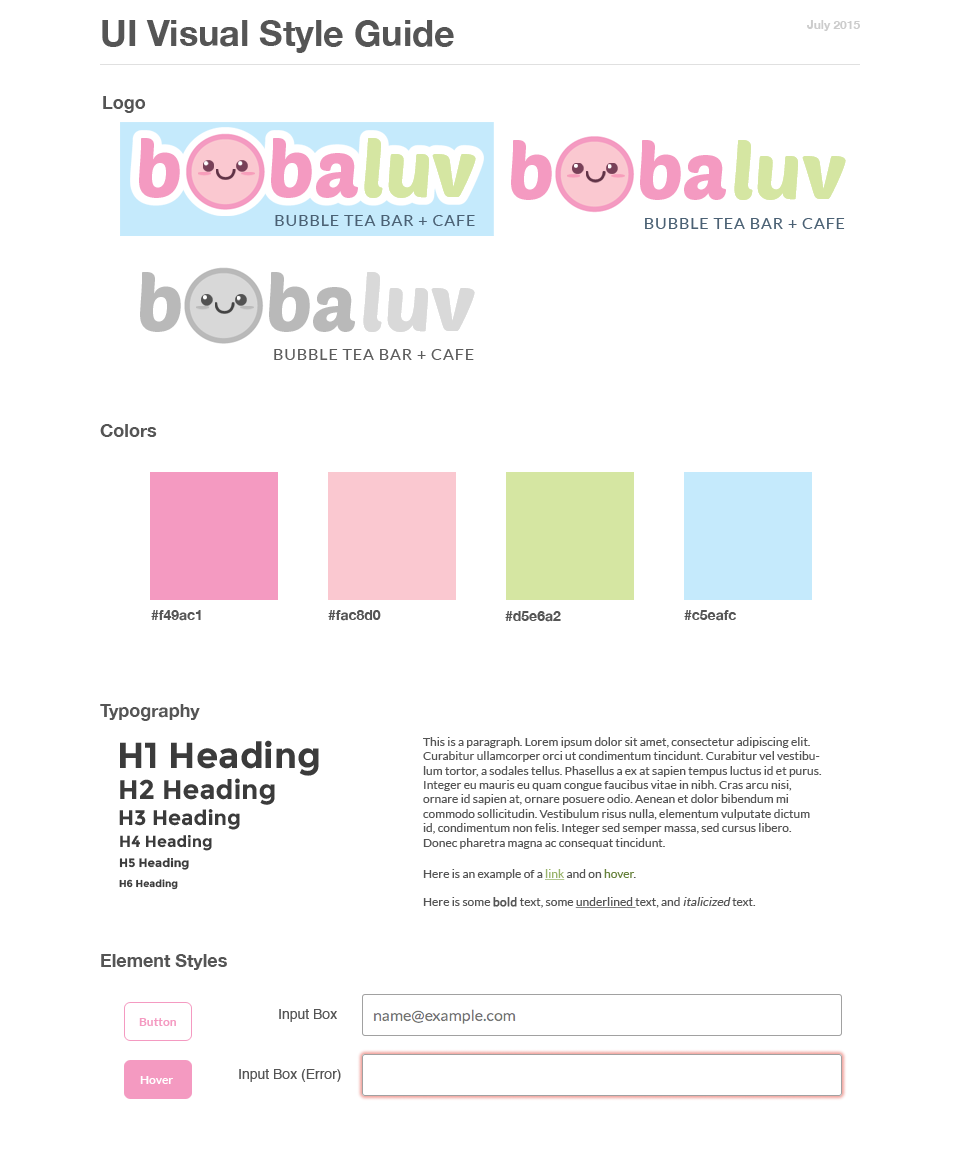
<style>
.page{position:relative;width:960px;height:1150px;background:#ffffff}
.page>*{position:absolute;margin:0}
.t1{font:36px "HelveticaNeue-Bold";color:#555555}
.t2{font:12px "HelveticaNeue-Bold";color:#cccccc}
.t3{font:18px "HelveticaNeue-Bold";color:#555555}
.t4{font:79.1px "PoetsenOne-Regular";color:#f49ac1}
.t5{font:79.1px "PoetsenOne-Regular";color:#d5e6a2}
.t6{font:16.2px "Lato-Regular";letter-spacing:0.05em;color:#4b6174}
.t7{font:79.1px "PoetsenOne-Regular";color:#b9b9b9}
.t8{font:79.1px "PoetsenOne-Regular";color:#d9d9d9}
.t9{font:14px "HelveticaNeue-Bold";color:#555555}
.t10{font:12px "Lato-Regular";color:#555555}
.t11{font:36px "Montserrat-Bold";color:#3b3b3b}
.t12{font:27px "Montserrat-Bold";color:#3b3b3b}
.t13{font:21px "Montserrat-Bold";color:#3b3b3b}
.t14{font:16px "Montserrat-Bold";color:#3b3b3b}
.t15{font:12px "Montserrat-Bold";color:#3b3b3b}
.t16{font:12px "Lato-Regular";color:#99b46b;text-decoration:underline}
.t17{font:12px "Lato-Regular";color:#67823c}
.t18{font:10px "Montserrat-Bold";color:#3b3b3b}
.t19{font:12px "Lato-Regular";color:#555555;font-weight:bold}
.t20{font:12px "Lato-Regular";color:#555555;text-decoration:underline}
.t21{font:12px "Lato-Regular";color:#555555;font-style:italic}
.t22{font:14px "Helvetica";color:#555555}
.t23{font:12px "Lato-Bold";color:#f49ac1}
.t24{font:12px "Lato-Bold";color:#ffffff}
</style>
<div class="page">
<p class="t1" style="left:102px;top:20px;width:352px;height:33px">UI Visual Style Guide</p>
<p class="t2" style="left:807px;top:20px;width:53px;height:11px">July 2015</p>
<p class="t3" style="left:103px;top:96px;width:43px;height:17px">Logo</p>
<p class="t4" style="left:139px;top:138px;width:219px;height:60px">b     ba</p>
<p class="t5" style="left:364px;top:138px;width:112px;height:60px">luv</p>
<p class="t5" style="left:364px;top:138px;width:112px;height:60px">luv</p>
<p class="t5" style="left:364px;top:138px;width:112px;height:60px">luv</p>
<p class="t5" style="left:364px;top:138px;width:112px;height:60px">luv</p>
<p class="t4" style="left:511px;top:140px;width:215px;height:60px">b     ba</p>
<p class="t5" style="left:734px;top:140px;width:112px;height:60px">luv</p>
<p class="t5" style="left:734px;top:140px;width:112px;height:60px">luv</p>
<p class="t6" style="left:275px;top:215px;width:200px;height:11px">BUBBLE TEA BAR + CAFE</p>
<p class="t6" style="left:645px;top:218px;width:200px;height:11px">BUBBLE TEA BAR + CAFE</p>
<p class="t7" style="left:140px;top:272px;width:215px;height:60px">b     ba</p>
<p class="t8" style="left:363px;top:272px;width:112px;height:60px">luv</p>
<p class="t8" style="left:363px;top:272px;width:112px;height:60px">luv</p>
<p class="t6" style="left:274px;top:349px;width:200px;height:11px">BUBBLE TEA BAR + CAFE</p>
<p class="t3" style="left:100px;top:424px;width:57px;height:13px">Colors</p>
<p class="t9" style="left:151px;top:610px;width:50px;height:11px">#f49ac1</p>
<p class="t9" style="left:328px;top:610px;width:53px;height:11px">#fac8d0</p>
<p class="t9" style="left:505px;top:611px;width:56px;height:11px">#d5e6a2</p>
<p class="t9" style="left:684px;top:610px;width:52px;height:11px">#c5eafc</p>
<p class="t3" style="left:100px;top:704px;width:100px;height:17px">Typography</p>
<p class="t10" style="left:423px;top:737px;width:399px;height:112px">This is a paragraph. Lorem ipsum dolor sit amet, consectetur adipiscing elit. Curabitur ullamcorper orci ut condimentum tincidunt. Curabitur vel vestibulum tortor, a sodales tellus. Phasellus a ex at sapien tempus luctus id et purus. Integer eu mauris eu quam congue faucibus vitae in nibh. Cras arcu nisi, ornare id sapien at, ornare posuere odio. Aenean et dolor bibendum mi commodo sollicitudin. Vestibulum risus nulla, elementum vulputate dictum id, condimentum non felis. Integer sed semper massa, sed cursus libero. Donec pharetra magna ac consequat tincidunt.</p>
<p class="t11" style="left:120px;top:740px;width:199px;height:36px">H1 Heading</p>
<p class="t12" style="left:120px;top:778px;width:155px;height:27px">H2 Heading</p>
<p class="t13" style="left:119px;top:809px;width:121px;height:21px">H3 Heading</p>
<p class="t14" style="left:120px;top:835px;width:92px;height:16px">H4 Heading</p>
<p class="t15" style="left:119px;top:857px;width:70px;height:13px">H5 Heading</p>
<p class="t10" style="left:423px;top:869px;width:213px;height:11px">Here is an example of a <span class="t16">link</span> and on <span class="t17">hover</span>.</p>
<p class="t18" style="left:119px;top:879px;width:59px;height:11px">H6 Heading</p>
<p class="t10" style="left:423px;top:897px;width:333px;height:11px">Here is some <span class="t19">bold </span>text, some <span class="t20">underlined </span>text, and <span class="t21">italicized </span>text.</p>
<p class="t3" style="left:101px;top:954px;width:126px;height:16px">Element Styles</p>
<p class="t22" style="left:279px;top:1009px;width:58px;height:13px">Input Box</p>
<p class="t23" style="left:139px;top:1018px;width:37px;height:8px">Button</p>
<p class="t22" style="left:239px;top:1069px;width:102px;height:13px">Input Box (Error)</p>
<p class="t24" style="left:140px;top:1076px;width:33px;height:8px">Hover</p>
</div>
